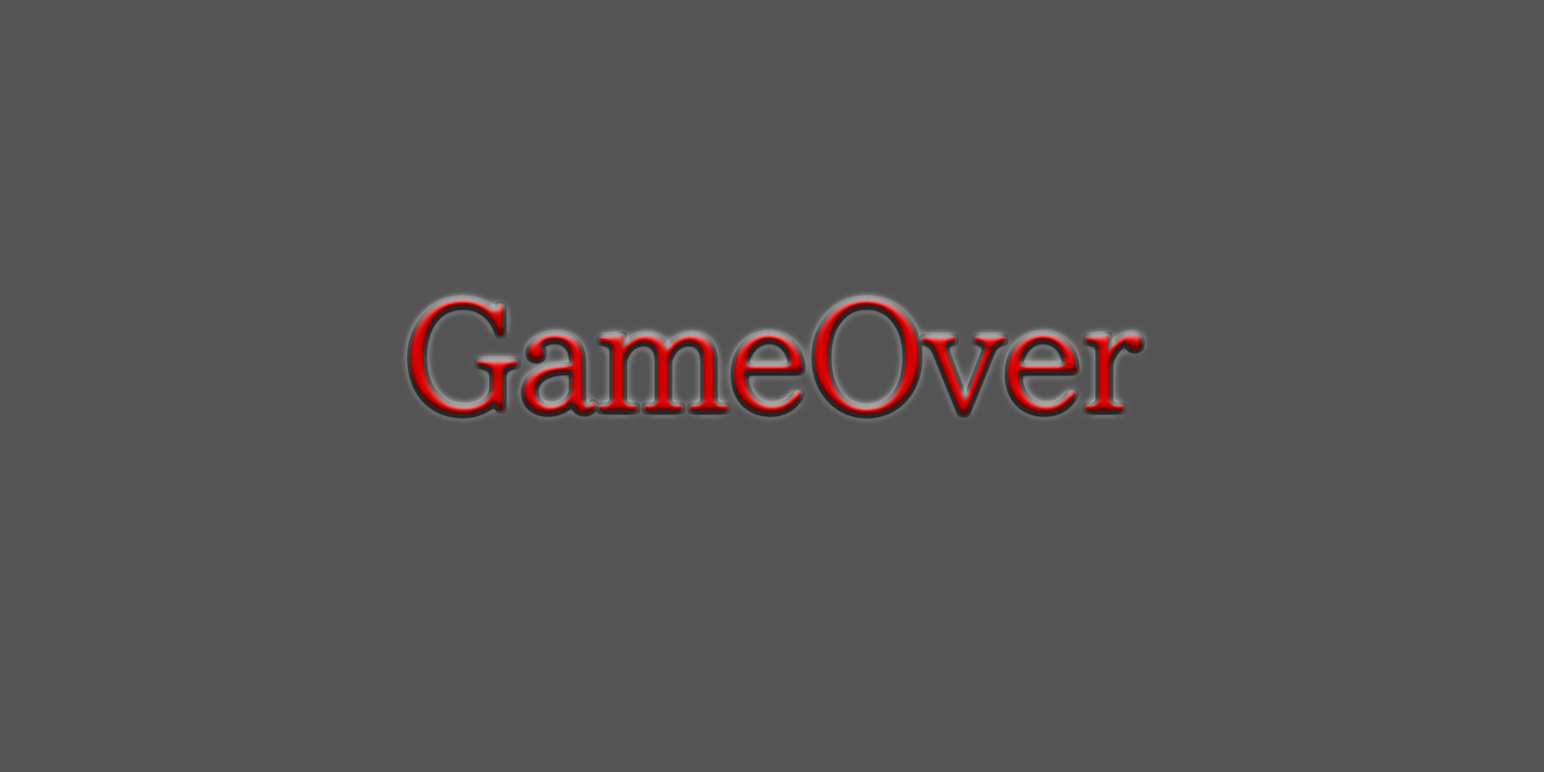
<style>
.page{position:relative;width:1544px;height:772px;background:#545454}
.page>*{position:absolute;margin:0}
.t1{font:150.8px "Koku-Mincho-Regular";letter-spacing:-0.025em}
</style>
<div class="page">
<p class="t1" style="left:411px;top:300px;width:731px;height:115px">GameOver</p>
</div>
